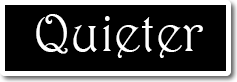
<style>
.page{position:relative;width:237px;height:82px;background:#000000}
.page>*{position:absolute;margin:0}
.t1{font:53px "Harrington";color:#ffffff}
</style>
<div class="page">
<p class="t1" style="left:36px;top:14px;width:167px;height:44px">Quieter</p>
</div>
